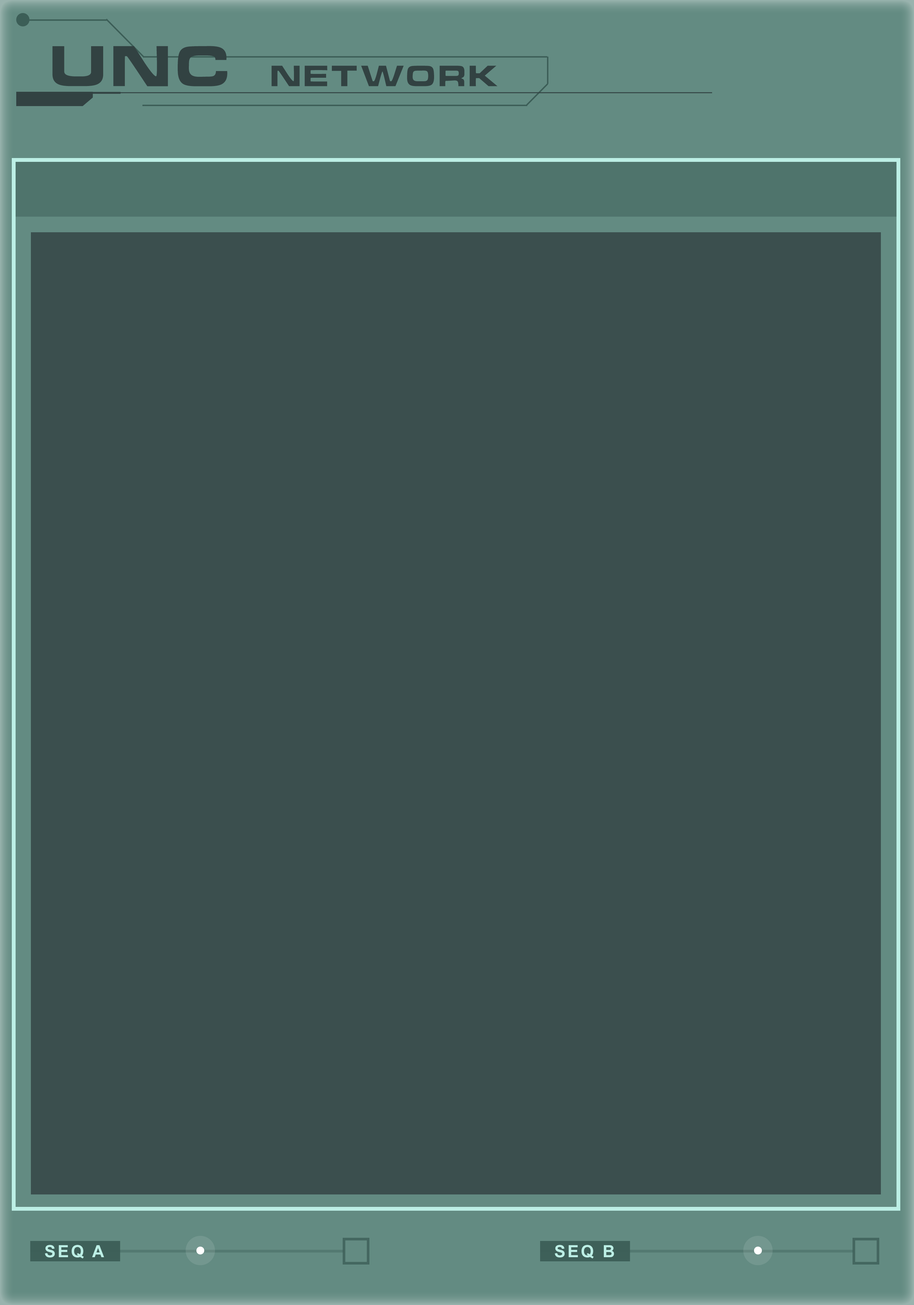
<style>
.page{position:relative;width:914px;height:1305px;background:#3b4f4e}
.page>*{position:absolute;margin:0}
.t1{font:26.9px "ChinoCapsSSK";letter-spacing:0.12em;color:#324242}
.t2{font:52.4px "ChinoCapsSSK";letter-spacing:0.12em;color:#324242}
.t3{font:16.8px "Arial-BoldMT";letter-spacing:0.12em;color:#bcefe5}
</style>
<div class="page">
<p class="t1" style="left:52px;top:46px;width:445px;height:40px"><span class="t2">UNC </span>NETWORK</p>
<p class="t3" style="left:45px;top:1244px;width:59px;height:14px">SEQ A</p>
<p class="t3" style="left:555px;top:1244px;width:59px;height:14px">SEQ B</p>
</div>
